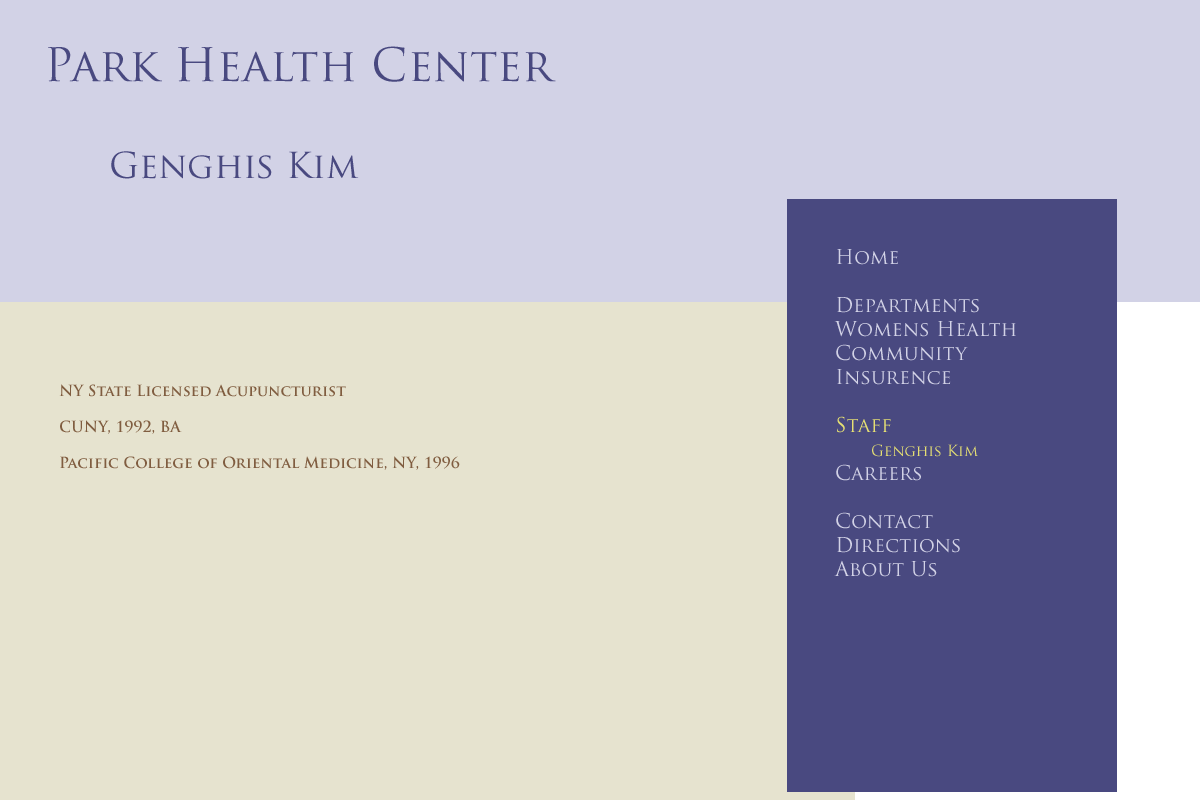
<style>
.page{position:relative;width:1200px;height:800px;background:#e6e3cf}
.page>*{position:absolute;margin:0}
.t1{font:45px "TrajanPro-Regular";color:#494980}
.t2{font:35px "TrajanPro-Regular";color:#494980}
.t3{font:20px "TrajanPro-Regular";color:#d2d2e6}
.t4{font:20px "TrajanPro-Regular";color:#e6e073}
.t5{font:15px "TrajanPro-Regular";color:#e6e073}
.t6{font:15px "TrajanPro-Bold";color:#805d40}
</style>
<div class="page">
<p class="t1" style="left:48px;top:46px;width:508px;height:36px">Park Health Center</p>
<p class="t2" style="left:111px;top:151px;width:248px;height:28px">Genghis Kim</p>
<p class="t3" style="left:834px;top:249px;width:182px;height:328px">Home<br><br>Departments<br>Womens Health<br>Community<br>Insurence<br><br><span class="t4">Staff<br> </span><span class="t5">Genghis Kim<br></span>Careers<br><br>Contact<br>Directions<br>About Us</p>
<p class="t6" style="left:59px;top:384px;width:401px;height:86px">NY State Licensed Acupuncturist<br><br>CUNY, 1992, BA<br><br>Pacific College of Oriental Medicine, NY, 1996</p>
</div>
